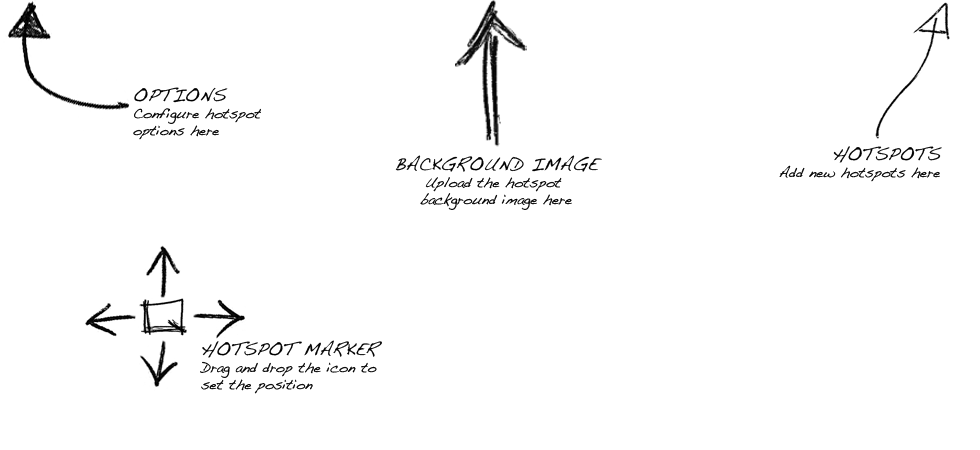
<style>
.page{position:relative;width:980px;height:450px;background:#ffffff}
.page>*{position:absolute;margin:0}
.t1{font:14px "Handwriting-Dakota";color:#000000}
.t2{font:18px "Handwriting-Dakota";color:#000000}
</style>
<div class="page">
<p class="t1" style="left:133px;top:87px;width:128px;height:53px"><span class="t2">OPTIONS<br></span>Configure hotspot <br>options here</p>
<p class="t1" style="left:779px;top:146px;width:163px;height:36px;text-align:right"><span class="t2">HOTSPOTS<br></span>Add new hotspots here</p>
<p class="t1" style="left:395px;top:155px;width:207px;height:55px;text-align:center"><span class="t2">BACKGROUND IMAGE<br></span>Upload the hotspot <br>background image here</p>
<p class="t1" style="left:200px;top:340px;width:182px;height:54px"><span class="t2">HOTSPOT MARKER<br></span>Drag and drop the icon to <br>set the position</p>
</div>
